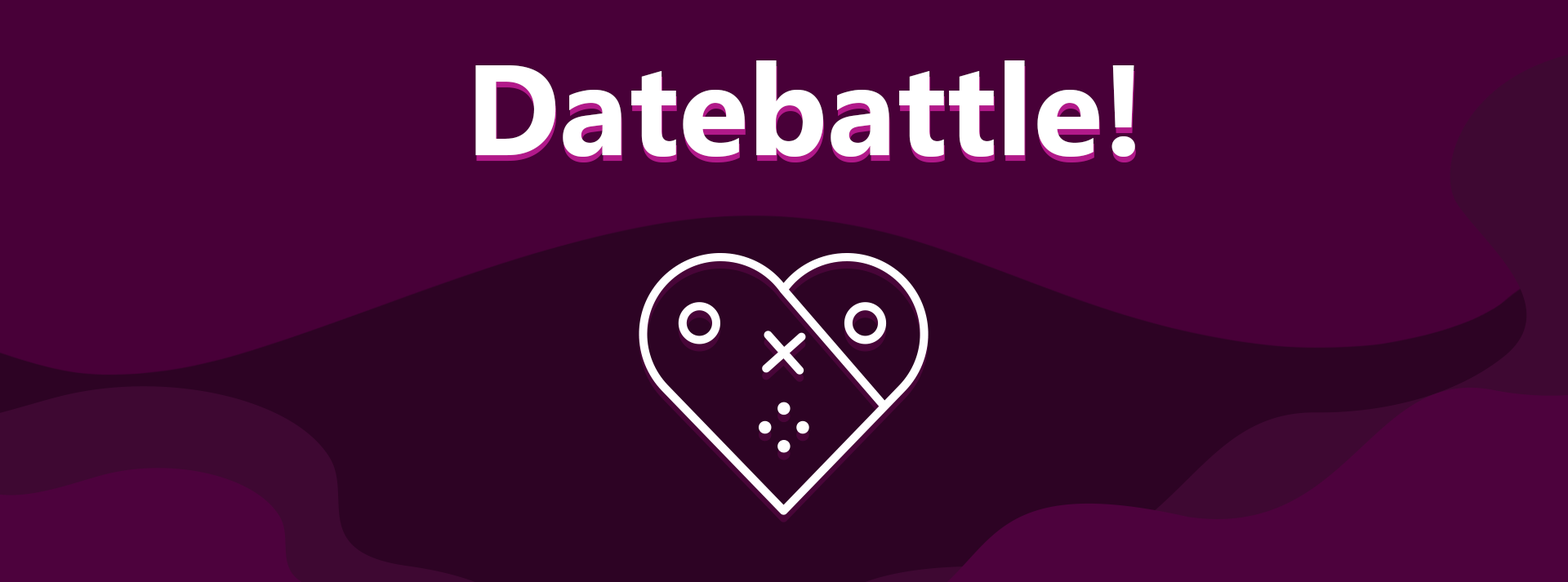
<style>
.page{position:relative;width:1568px;height:582px;background:#480038}
.page>*{position:absolute;margin:0}
.t1{font:128.2px "Ebrima-Bold";color:#ffffff}
</style>
<div class="page">
<p class="t1" style="left:475px;top:60px;width:660px;height:97px">Datebattle!</p>
<p class="t1" style="left:476px;top:66px;width:660px;height:97px">Datebattle!</p>
</div>
